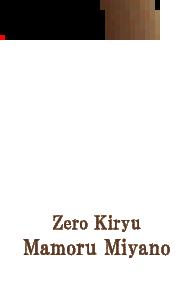
<style>
.page{position:relative;width:192px;height:296px;background:#ffffff}
.page>*{position:absolute;margin:0}
.t1{font:21.3px "HGPMinchoB";color:#583828}
.t2{font:18.7px "HGPMinchoB";color:#583828}
</style>
<div class="page">
<p class="t1" style="left:23px;top:215px;width:147px;height:43px;text-align:center"><span class="t2">Zero Kiryu<br></span>Mamoru Miyano</p>
</div>
